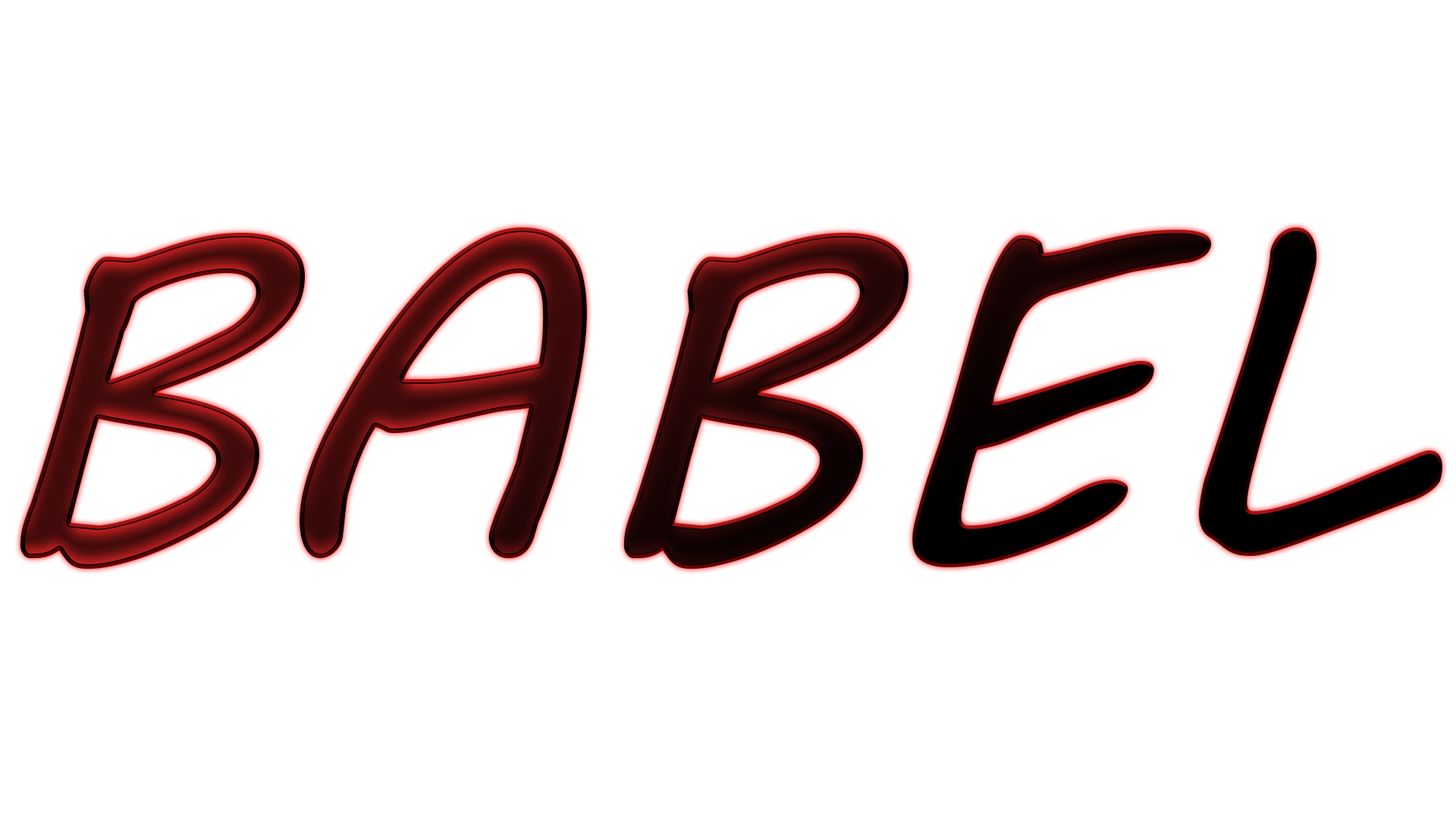
<style>
.page{position:relative;width:1456px;height:819px;background:#ffffff}
.page>*{position:absolute;margin:0}
.t1{font:466.1px "MVBoli"}
</style>
<div class="page">
<p class="t1" style="left:20px;top:227px;width:1422px;height:342px">BABEL</p>
</div>
